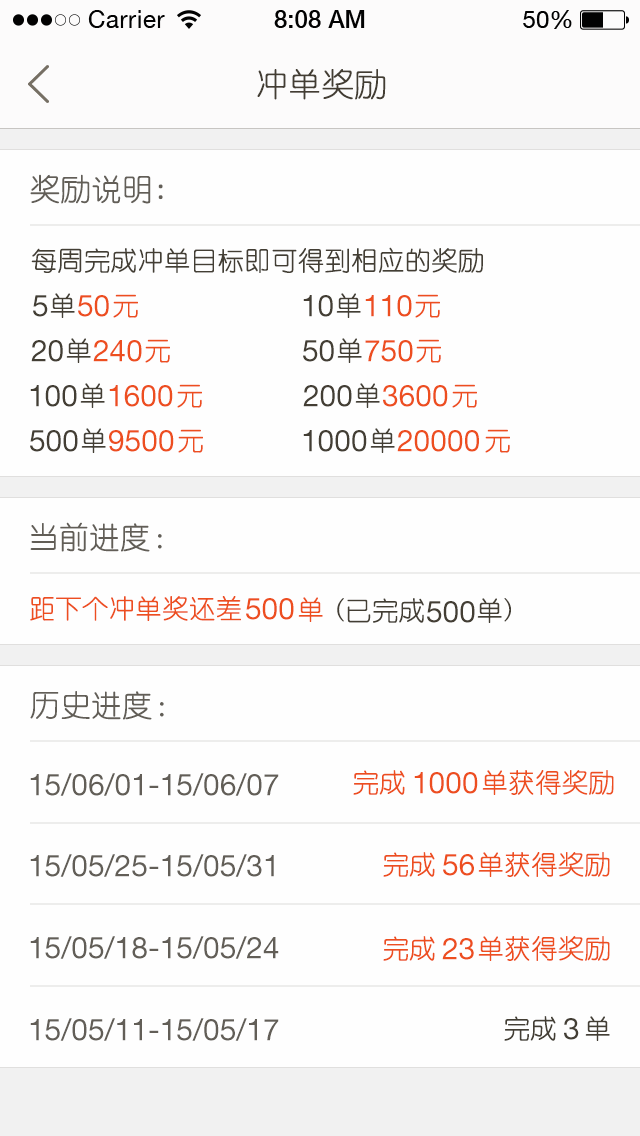
<style>
.page{position:relative;width:640px;height:1136px;background:#fefefe}
.page>*{position:absolute;margin:0}
.t1{font:32px "YouYuan";color:#433d33;text-transform:uppercase;font-weight:bold}
.t2{font:30px "YouYuan";color:#625e57;font-weight:bold}
.t3{font:26px "YouYuan";color:#433e34;font-weight:bold}
.t4{font:26px "YouYuan";color:#433e34;text-transform:uppercase;font-weight:bold}
.t5{font:26px "YouYuan";color:#ed4e1f;text-transform:uppercase;font-weight:bold}
.t6{font:30px "HelveticaNeueLTPro-Roman";color:#433e34;text-transform:uppercase}
.t7{font:30px "HelveticaNeueLTPro-Roman";color:#ed4e1f;text-transform:uppercase}
.t8{font:30px "HelveticaNeueLTPro-Roman";color:#625e57;text-transform:uppercase}
</style>
<div class="page">
<p class="t1" style="left:257px;top:69px;width:129px;height:31px">冲单奖励</p>
<p class="t2" style="left:30px;top:174px;width:133px;height:30px">奖励说明:</p>
<p class="t3" style="left:31px;top:247px;width:452px;height:26px">每周完成冲单目标即可得到相应的奖励</p>
<p class="t4" style="left:50px;top:293px;width:25px;height:25px">单</p>
<p class="t5" style="left:113px;top:294px;width:25px;height:24px">元</p>
<p class="t4" style="left:336px;top:293px;width:25px;height:25px">单</p>
<p class="t5" style="left:415px;top:294px;width:25px;height:24px">元</p>
<p class="t6" style="left:33px;top:295px;width:15px;height:22px">5</p>
<p class="t7" style="left:78px;top:295px;width:31px;height:22px">50</p>
<p class="t6" style="left:303px;top:295px;width:30px;height:22px">10</p>
<p class="t7" style="left:365px;top:295px;width:47px;height:22px">110</p>
<p class="t6" style="left:31px;top:340px;width:32px;height:22px">20</p>
<p class="t4" style="left:66px;top:338px;width:25px;height:25px">单</p>
<p class="t7" style="left:93px;top:340px;width:49px;height:22px">240</p>
<p class="t5" style="left:145px;top:339px;width:25px;height:24px">元</p>
<p class="t6" style="left:303px;top:340px;width:31px;height:22px">50</p>
<p class="t4" style="left:337px;top:338px;width:25px;height:25px">单</p>
<p class="t7" style="left:365px;top:340px;width:48px;height:22px">750</p>
<p class="t5" style="left:416px;top:339px;width:25px;height:24px">元</p>
<p class="t6" style="left:30px;top:385px;width:47px;height:22px">100</p>
<p class="t4" style="left:80px;top:383px;width:25px;height:25px">单</p>
<p class="t7" style="left:109px;top:385px;width:64px;height:22px">1600</p>
<p class="t5" style="left:177px;top:384px;width:25px;height:24px">元</p>
<p class="t6" style="left:303px;top:385px;width:49px;height:22px">200</p>
<p class="t4" style="left:355px;top:383px;width:25px;height:25px">单</p>
<p class="t7" style="left:383px;top:385px;width:65px;height:22px">3600</p>
<p class="t5" style="left:452px;top:384px;width:25px;height:24px">元</p>
<p class="t6" style="left:30px;top:430px;width:48px;height:22px">500</p>
<p class="t4" style="left:81px;top:428px;width:25px;height:25px">单</p>
<p class="t7" style="left:109px;top:430px;width:65px;height:22px">9500</p>
<p class="t5" style="left:178px;top:429px;width:25px;height:24px">元</p>
<p class="t6" style="left:303px;top:430px;width:64px;height:22px">1000</p>
<p class="t4" style="left:370px;top:428px;width:25px;height:25px">单</p>
<p class="t7" style="left:397px;top:430px;width:82px;height:22px">20000</p>
<p class="t5" style="left:485px;top:429px;width:25px;height:24px">元</p>
<p class="t2" style="left:30px;top:522px;width:132px;height:30px">当前进度：</p>
<p class="t5" style="left:30px;top:596px;width:211px;height:25px">距下个冲单奖还差</p>
<p class="t7" style="left:246px;top:598px;width:48px;height:22px">500</p>
<p class="t5" style="left:298px;top:597px;width:25px;height:25px">单</p>
<p class="t4" style="left:337px;top:598px;width:87px;height:25px">(已完成</p>
<p class="t6" style="left:427px;top:601px;width:48px;height:22px">500</p>
<p class="t4" style="left:477px;top:598px;width:34px;height:25px">单)</p>
<p class="t2" style="left:30px;top:691px;width:134px;height:29px">历史进度：</p>
<p class="t8" style="left:30px;top:773px;width:249px;height:23px">15/06/01-15/06/07</p>
<p class="t5" style="left:353px;top:770px;width:52px;height:25px">完成</p>
<p class="t7" style="left:414px;top:772px;width:64px;height:22px">1000</p>
<p class="t5" style="left:482px;top:770px;width:132px;height:25px">单获得奖励</p>
<p class="t8" style="left:30px;top:854px;width:244px;height:23px">15/05/25-15/05/31</p>
<p class="t5" style="left:383px;top:852px;width:52px;height:25px">完成</p>
<p class="t7" style="left:443px;top:854px;width:31px;height:22px">56</p>
<p class="t5" style="left:478px;top:852px;width:132px;height:25px">单获得奖励</p>
<p class="t8" style="left:30px;top:936px;width:249px;height:23px">15/05/18-15/05/24</p>
<p class="t5" style="left:383px;top:936px;width:52px;height:25px">完成</p>
<p class="t7" style="left:442px;top:938px;width:32px;height:22px">23</p>
<p class="t5" style="left:478px;top:936px;width:132px;height:25px">单获得奖励</p>
<p class="t8" style="left:30px;top:1018px;width:249px;height:23px">15/05/11-15/05/17</p>
<p class="t4" style="left:504px;top:1016px;width:52px;height:25px">完成</p>
<p class="t6" style="left:564px;top:1018px;width:15px;height:22px">3</p>
<p class="t4" style="left:585px;top:1016px;width:25px;height:25px">单</p>
</div>
